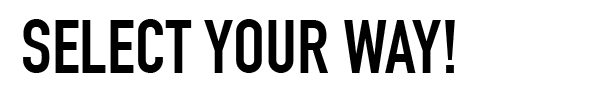
<style>
.page{position:relative;width:591px;height:91px;background:#ffffff}
.page>*{position:absolute;margin:0}
.t1{font:75px "DINCondensed-Bold";color:#000000}
</style>
<div class="page">
<p class="t1" style="left:23px;top:19px;width:432px;height:54px">SELECT YOUR WAY!</p>
</div>
